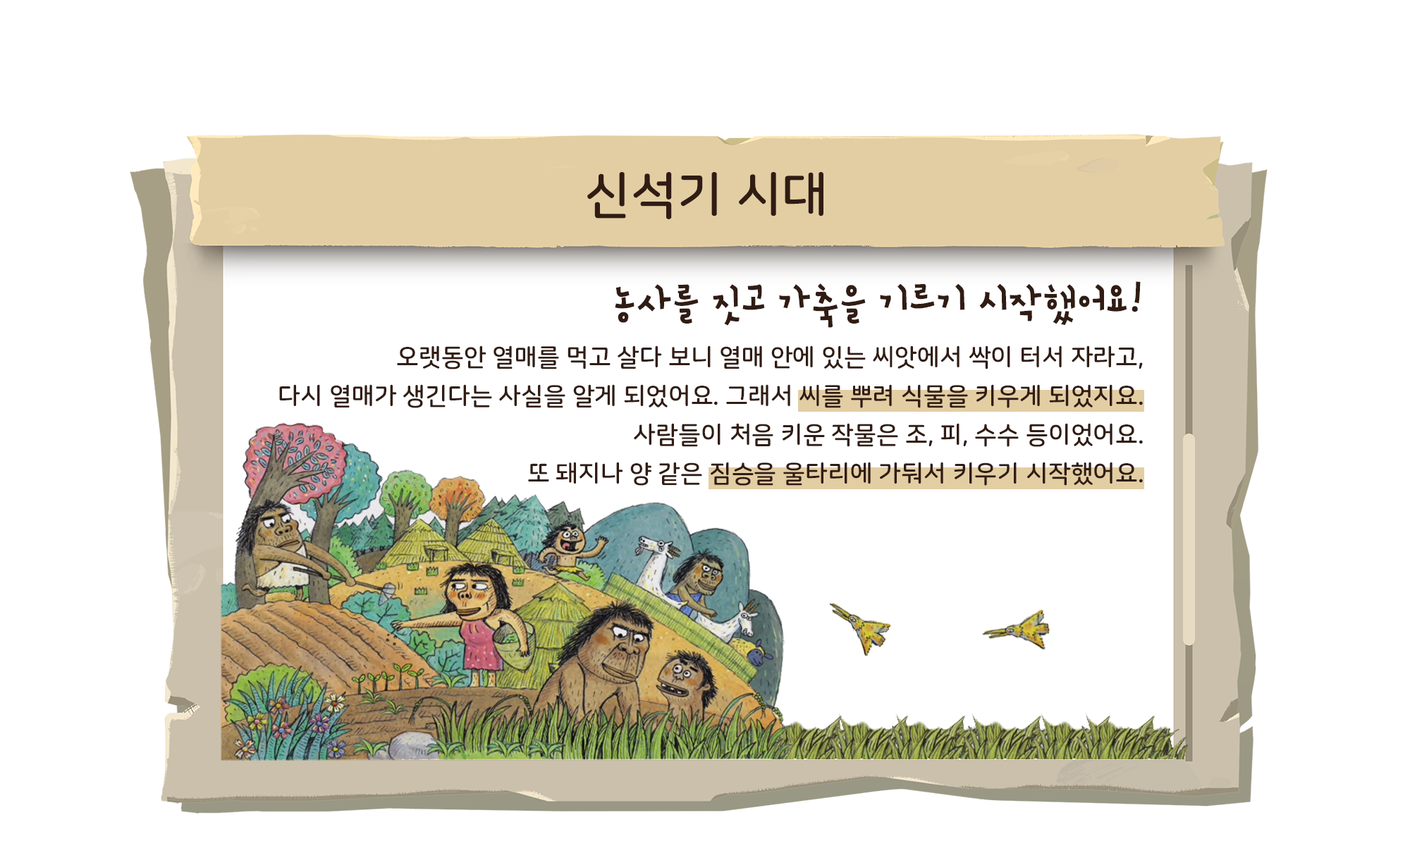
<style>
.page{position:relative;width:1410px;height:846px;background:#ffffff}
.page>*{position:absolute;margin:0}
.t1{font:50.8px "NanumSquareRoundOTFB";color:#301c13}
.t2{font:24.7px/38.8px "NanumSquareRoundOTFB";color:#301c13}
.t3{font:50.8px/64.8px "SDdBYeonpil-cBd";color:#301c13}
</style>
<div class="page">
<p class="t1" style="left:587px;top:172px;width:236px;height:47px">신석기 시대</p>
<p class="t2" style="left:279px;top:281px;width:864px;height:205px;text-align:right"><span class="t3">농사를 짓고 가축을 기르기 시작했어요!<br></span>오랫동안 열매를 먹고 살다 보니 열매 안에 있는 씨앗에서 싹이 터서 자라고,<br>다시 열매가 생긴다는 사실을 알게 되었어요. 그래서 씨를 뿌려 식물을 키우게 되었지요.<br>                                       사람들이 처음 키운 작물은 조, 피, 수수 등이었어요.<br>                                                                  또 돼지나 양 같은 짐승을 울타리에 가둬서 키우기 시작했어요.</p>
</div>
